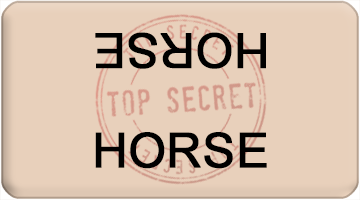
<style>
.page{position:relative;width:360px;height:200px;background:#e8d0bb}
.page>*{position:absolute;margin:0}
.t1{font:48px "ArialMT";color:#000000;font-weight:bold}
</style>
<div class="page">
<p class="t1" style="left:95px;top:32px;width:171px;height:37px;rotate:180deg">HORSE</p>
<p class="t1" style="left:95px;top:132px;width:172px;height:37px">HORSE</p>
</div>
